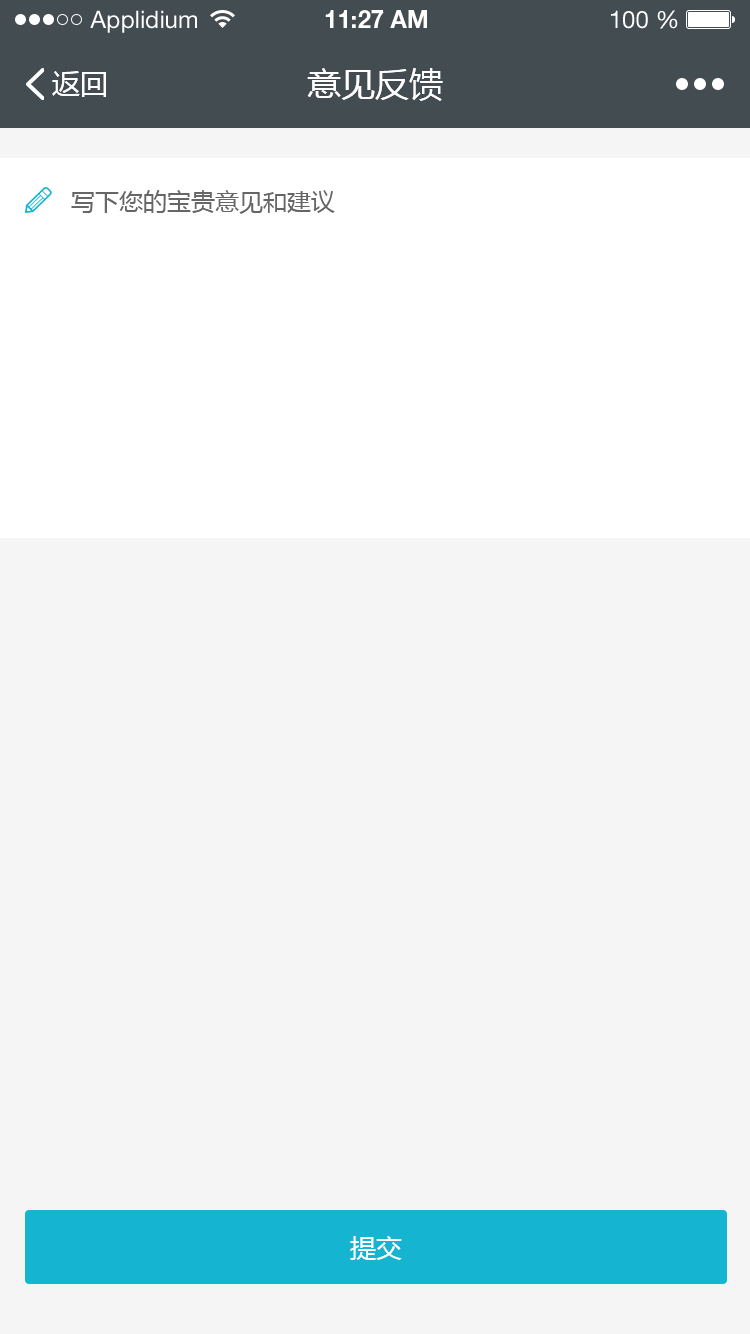
<style>
.page{position:relative;width:750px;height:1334px;background:#f5f5f5}
.page>*{position:absolute;margin:0}
.t1{font:24px "HelveticaNeueLTStd-Roman";color:#ffffff}
.t2{font:24px "HelveticaNeueLTStd-Bd";color:#ffffff}
.t3{font:28px "MicrosoftYaHei";color:#ffffff}
.t4{font:34px "MicrosoftYaHei";color:#ffffff}
.t5{font:24px "MicrosoftYaHei";color:#666666}
.t6{font:26px "MicrosoftYaHei";color:#ffffff}
</style>
<div class="page">
<p class="t1" style="left:90px;top:10px;width:107px;height:23px">Applidium</p>
<p class="t2" style="left:325px;top:10px;width:102px;height:18px">11:27 AM</p>
<p class="t1" style="left:611px;top:10px;width:67px;height:19px">100 %</p>
<p class="t3" style="left:52px;top:71px;width:54px;height:26px">返回</p>
<p class="t4" style="left:307px;top:68px;width:136px;height:33px">意见反馈</p>
<p class="t5" style="left:71px;top:190px;width:264px;height:24px">写下您的宝贵意见和建议</p>
<p class="t6" style="left:350px;top:1236px;width:52px;height:24px">提交</p>
</div>
